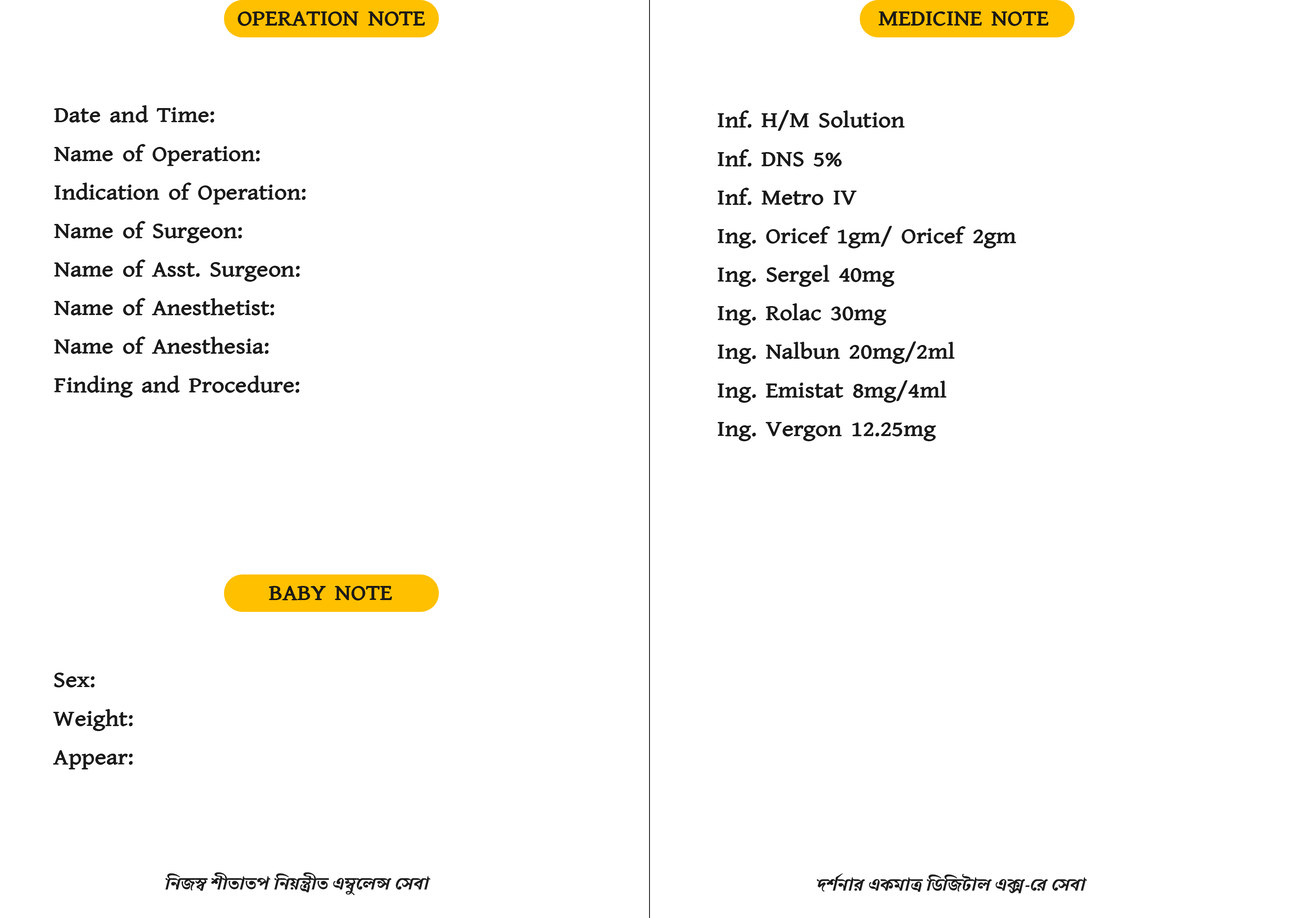
<style>
.page{position:relative;width:1299px;height:918px;background:#ffffff}
.page>*{position:absolute;margin:0}
.t1{font:21.6px "Kalpurush";color:#1d1d1d;scale:1.16 1}
.t2{font:21.6px/38.6px "Kalpurush";color:#1d1d1d;scale:1.16 1}
.t3{font:17px "Galada-Regular";color:#1d1d1d;scale:1.16 1}
</style>
<div class="page">
<p class="t1" style="left:238px;top:11px;width:187px;height:15px">OPERATION NOTE</p>
<p class="t1" style="left:879px;top:12px;width:169px;height:14px">MEDICINE NOTE</p>
<p class="t2" style="left:54px;top:106px;width:251px;height:291px">Date and Time:<br>Name of Operation:<br>Indication of Operation:<br>Name of Surgeon:<br>Name of Asst. Surgeon:<br>Name of Anesthetist:<br>Name of Anesthesia:<br>Finding and Procedure:</p>
<p class="t2" style="left:718px;top:110px;width:298px;height:331px">Inf. H/M Solution<br>Inf. DNS 5%<br>Inf. Metro IV<br>Ing. Oricef 1gm/ Oricef 2gm<br>Ing. Sergel 40mg<br>Ing. Rolac 30mg<br>Ing. Nalbun 20mg/2ml<br>Ing. Emistat 8mg/4ml<br>Ing. Vergon 12.25mg</p>
<p class="t1" style="left:269px;top:586px;width:123px;height:14px">BABY NOTE</p>
<p class="t2" style="left:53px;top:673px;width:80px;height:96px">Sex:<br>Weight:<br>Appear:</p>
<p class="t3" style="left:165px;top:872px;width:265px;height:24px">নিজস্ব শীতাতপ নিয়ন্ত্রীত এম্বুলেন্স সেবা</p>
<p class="t3" style="left:816px;top:873px;width:271px;height:21px">দর্শনার একমাত্র ডিজিটাল এক্স-রে সেবা</p>
</div>
